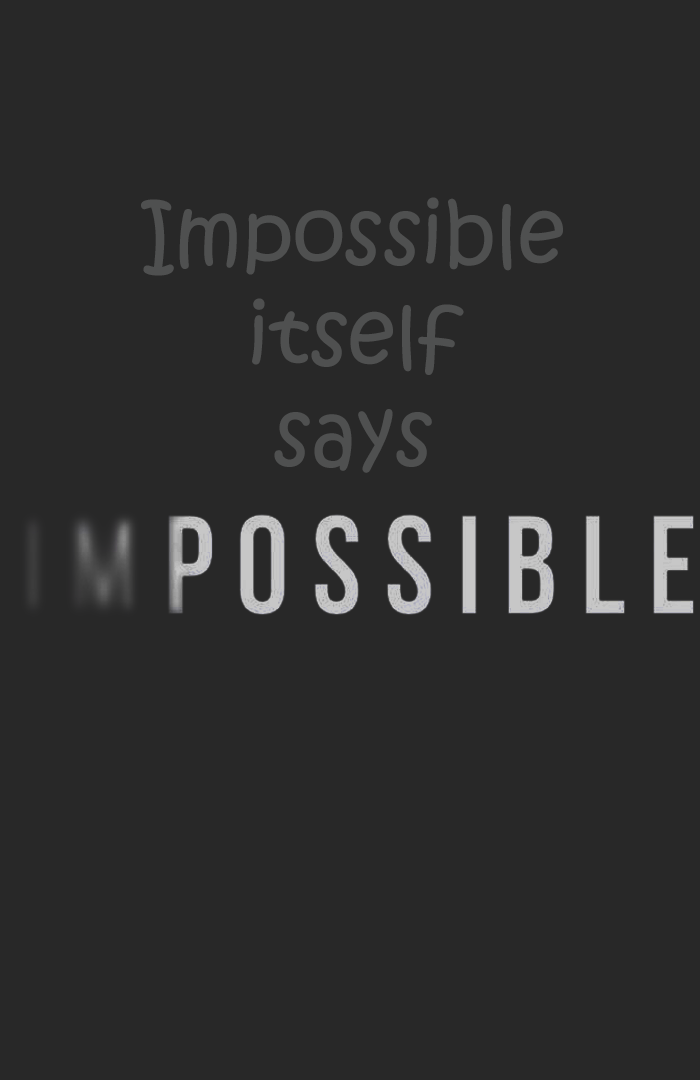
<style>
.page{position:relative;width:700px;height:1080px;background:#282828}
.page>*{position:absolute;margin:0}
.t1{font:84px "KristenITC-Regular";color:#4f5050}
</style>
<div class="page">
<p class="t1" style="left:141px;top:197px;width:422px;height:276px;text-align:center">Impossible<br>itself<br>says</p>
</div>
